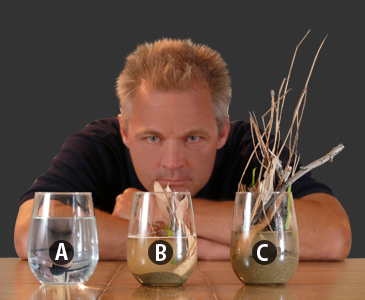
<style>
.page{position:relative;width:365px;height:300px;background:#333333}
.page>*{position:absolute;margin:0}
.t1{font:21.1px "AdobeGothicStd-Bold";letter-spacing:0.022em;color:#ffffff;text-transform:uppercase}
</style>
<div class="page">
<p class="t1" style="left:55px;top:243px;width:13px;height:17px">A</p>
<p class="t1" style="left:156px;top:244px;width:10px;height:17px">B</p>
<p class="t1" style="left:257px;top:244px;width:11px;height:17px">C</p>
</div>
